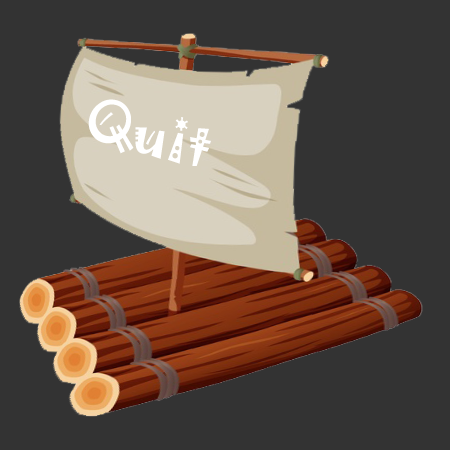
<style>
.page{position:relative;width:450px;height:450px;background:#333333}
.page>*{position:absolute;margin:0}
.t1{font:60px "Jokerman-Regular";color:#ffffff}
</style>
<div class="page">
<p class="t1" style="left:88px;top:99px;width:123px;height:67px;rotate:11deg">Quit</p>
</div>
